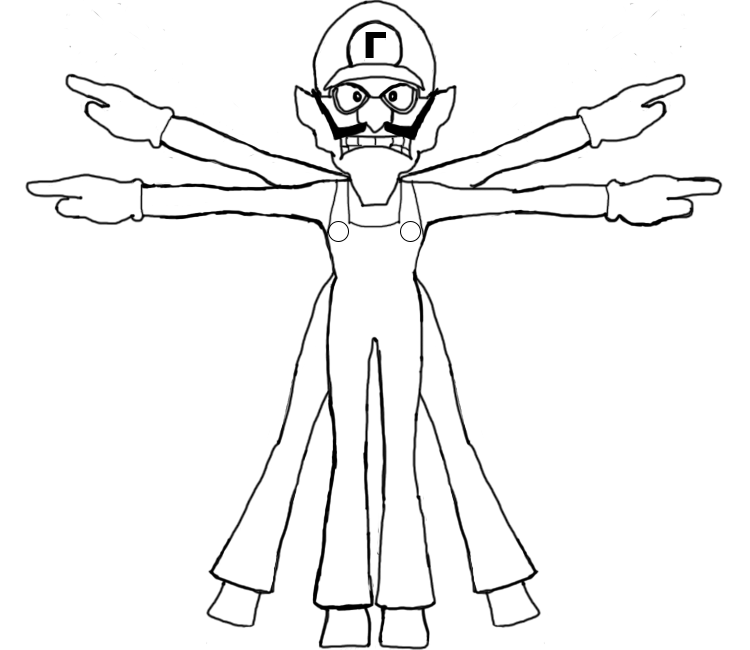
<style>
.page{position:relative;width:750px;height:650px;background:#ffffff}
.page>*{position:absolute;margin:0}
.t1{font:36px "Arial-Black";color:#000000}
</style>
<div class="page">
<p class="t1" style="left:365px;top:32px;width:21px;height:26px">L</p>
</div>
